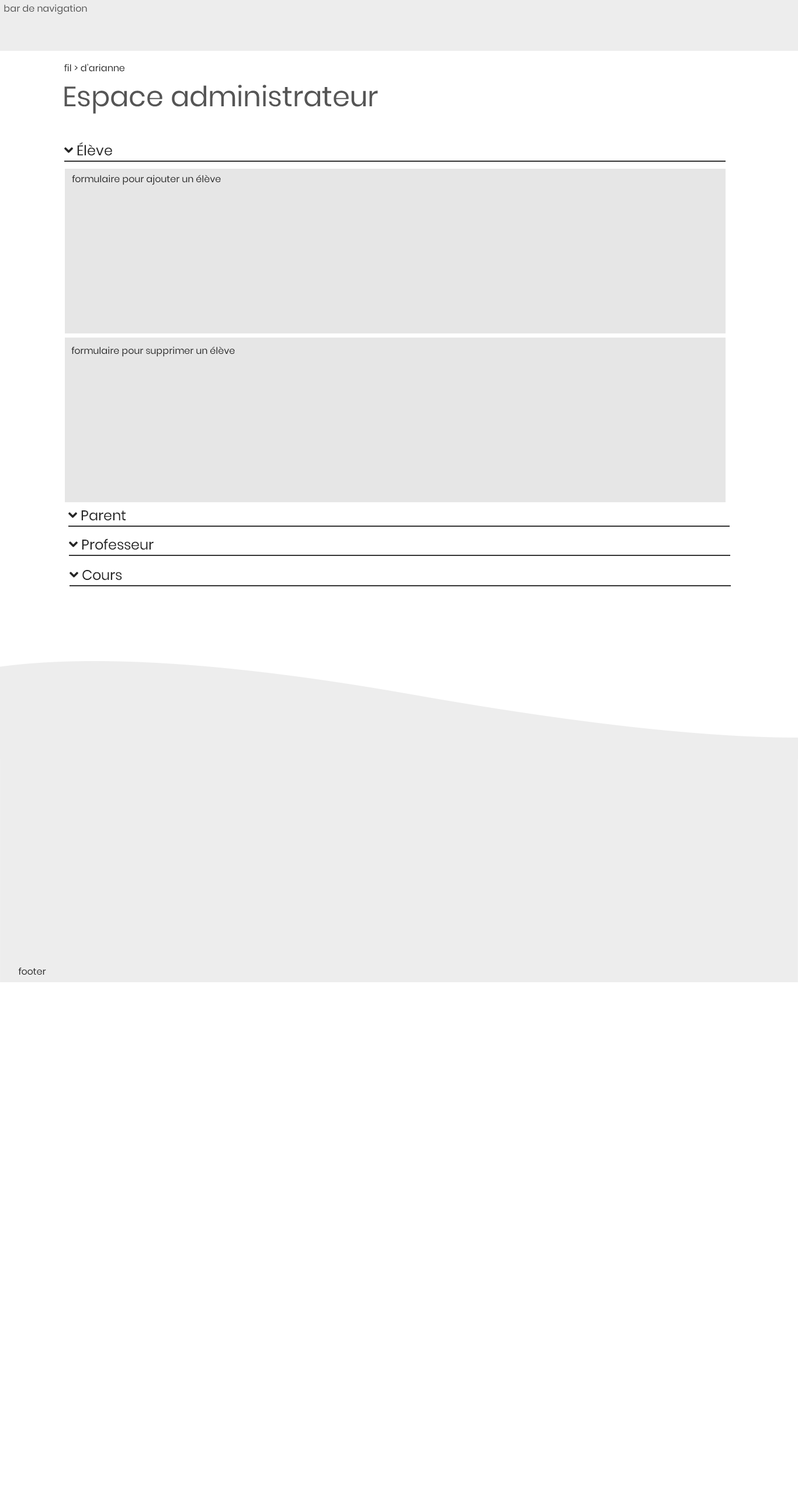
<style>
.page{position:relative;width:798px;height:1495px;background:#ffffff}
.page>*{position:absolute;margin:0}
.t1{font:9.3px "Poppins-Regular";color:#555555}
.t2{font:9.3px "Poppins-Regular";color:#262626}
.t3{font:28px "Poppins-Regular";color:#555555}
</style>
<div class="page">
<p class="t1" style="left:4px;top:4px;width:83px;height:11px">bar de navigation</p>
<p class="t2" style="left:64px;top:64px;width:60px;height:7px">fil &gt; d’arianne</p>
<p class="t3" style="left:64px;top:85px;width:314px;height:29px">Espace administrateur</p>
<p class="t2" style="left:72px;top:175px;width:149px;height:10px">formulaire pour ajouter un élève</p>
<p class="t2" style="left:71px;top:346px;width:164px;height:11px">formulaire pour supprimer un élève</p>
<p class="t2" style="left:18px;top:967px;width:28px;height:8px">footer</p>
</div>
